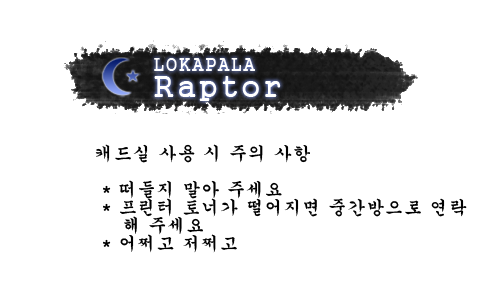
<style>
.page{position:relative;width:500px;height:300px;background:#ffffff}
.page>*{position:absolute;margin:0}
.t1{font:18px "Gungsuh";letter-spacing:0.05em;color:#ffffff}
.t2{font:30px "Gungsuh";letter-spacing:0.1em;color:#ffffff}
.t3{font:18px/18px "Gungsuh";letter-spacing:0.05em;color:#000000}
</style>
<div class="page">
<p class="t1" style="left:154px;top:58px;width:101px;height:13px">LOKAPALA</p>
<p class="t2" style="left:154px;top:76px;width:127px;height:25px">Raptor</p>
<p class="t3" style="left:95px;top:144px;width:372px;height:109px">캐드실 사용 시 주의 사항<br><br> * 떠들지 말아 주세요<br> * 프린터 토너가 떨어지면 중간방으로 연락<br>    해 주세요<br> * 어쩌고 저쩌고</p>
</div>
